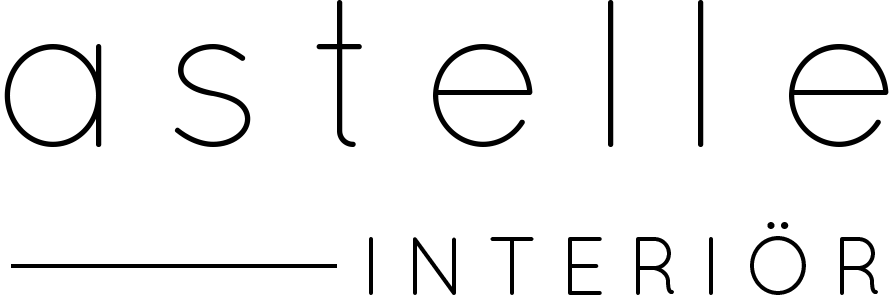
<style>
.page{position:relative;width:892px;height:295px;background:#ffffff}
.page>*{position:absolute;margin:0}
.t1{font:210px "QuicksandLight-Regular";letter-spacing:0.18em;color:#000000}
.t2{font:82.8px "QuicksandBook-Regular";letter-spacing:0.23em;color:#000000}
</style>
<div class="page">
<p class="t1" style="left:4px;top:0px;width:885px;height:147px">astelle</p>
<p class="t2" style="left:369px;top:222px;width:509px;height:73px">INTERIÖR</p>
</div>
